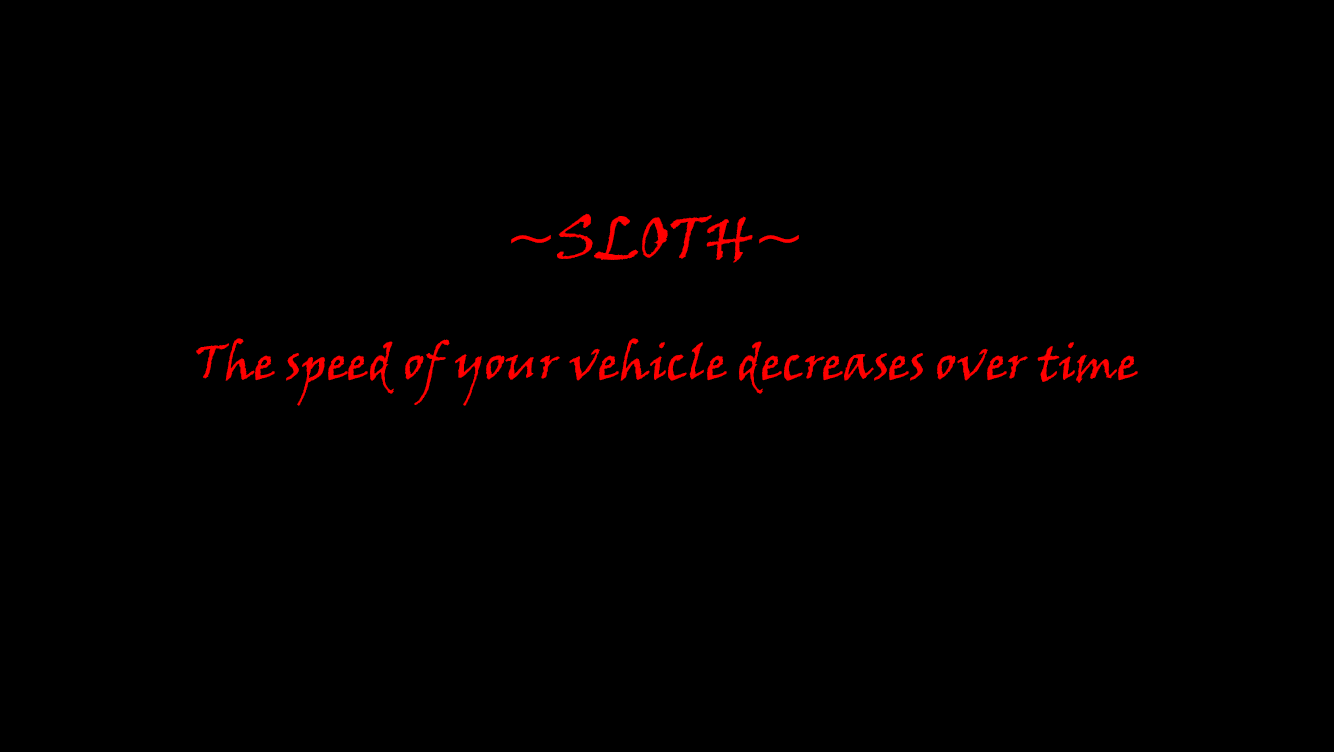
<style>
.page{position:relative;width:1334px;height:752px;background:#000000}
.page>*{position:absolute;margin:0}
.t1{font:60px "VinerHandITC";color:#ff0000}
.t2{font:48px "VinerHandITC";color:#ff0000}
</style>
<div class="page">
<p class="t1" style="left:511px;top:213px;width:288px;height:50px">~SLOTH~</p>
<p class="t2" style="left:196px;top:338px;width:942px;height:68px">The speed of your vehicle decreases over time</p>
</div>
